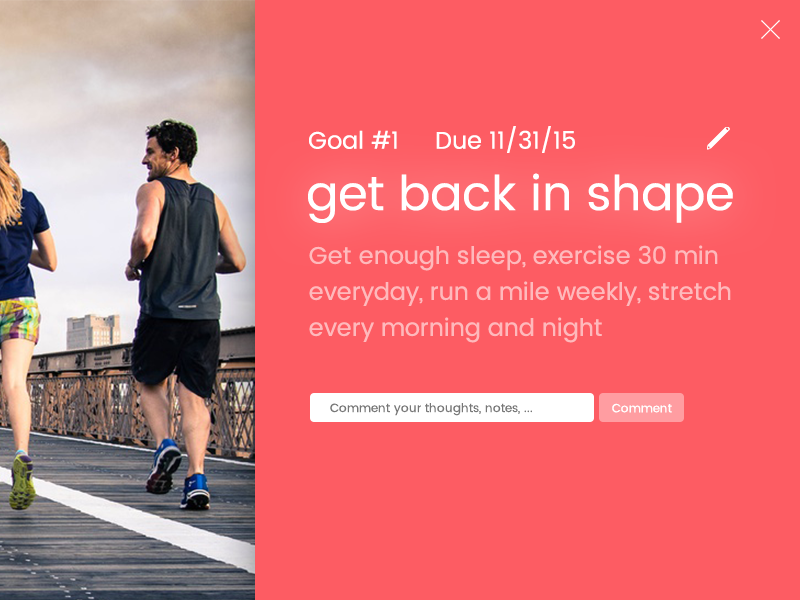
<style>
.page{position:relative;width:800px;height:600px;background:#fd5c63}
.page>*{position:absolute;margin:0}
.t1{font:24px "Poppins-Regular";color:#ffffff}
.t2{font:48px "Poppins-Regular";color:#ffffff}
.t3{font:24px/36px "Poppins-Regular";color:#feb9bc}
.t4{font:12px "Poppins-Regular";color:#777777}
.t5{font:12px "Poppins-Regular";color:#ffffff}
</style>
<div class="page">
<p class="t1" style="left:436px;top:126px;width:139px;height:27px">Due 11/31/15</p>
<p class="t1" style="left:309px;top:130px;width:88px;height:19px">Goal #1</p>
<p class="t2" style="left:308px;top:173px;width:425px;height:50px">get back in shape</p>
<p class="t3" style="left:309px;top:245px;width:422px;height:98px">Get enough sleep, exercise 30 min<br>everyday, run a mile weekly, stretch<br>every morning and night</p>
<p class="t4" style="left:330px;top:403px;width:202px;height:13px">Comment your thoughts, notes, ...</p>
<p class="t5" style="left:612px;top:403px;width:60px;height:10px">Comment</p>
</div>
